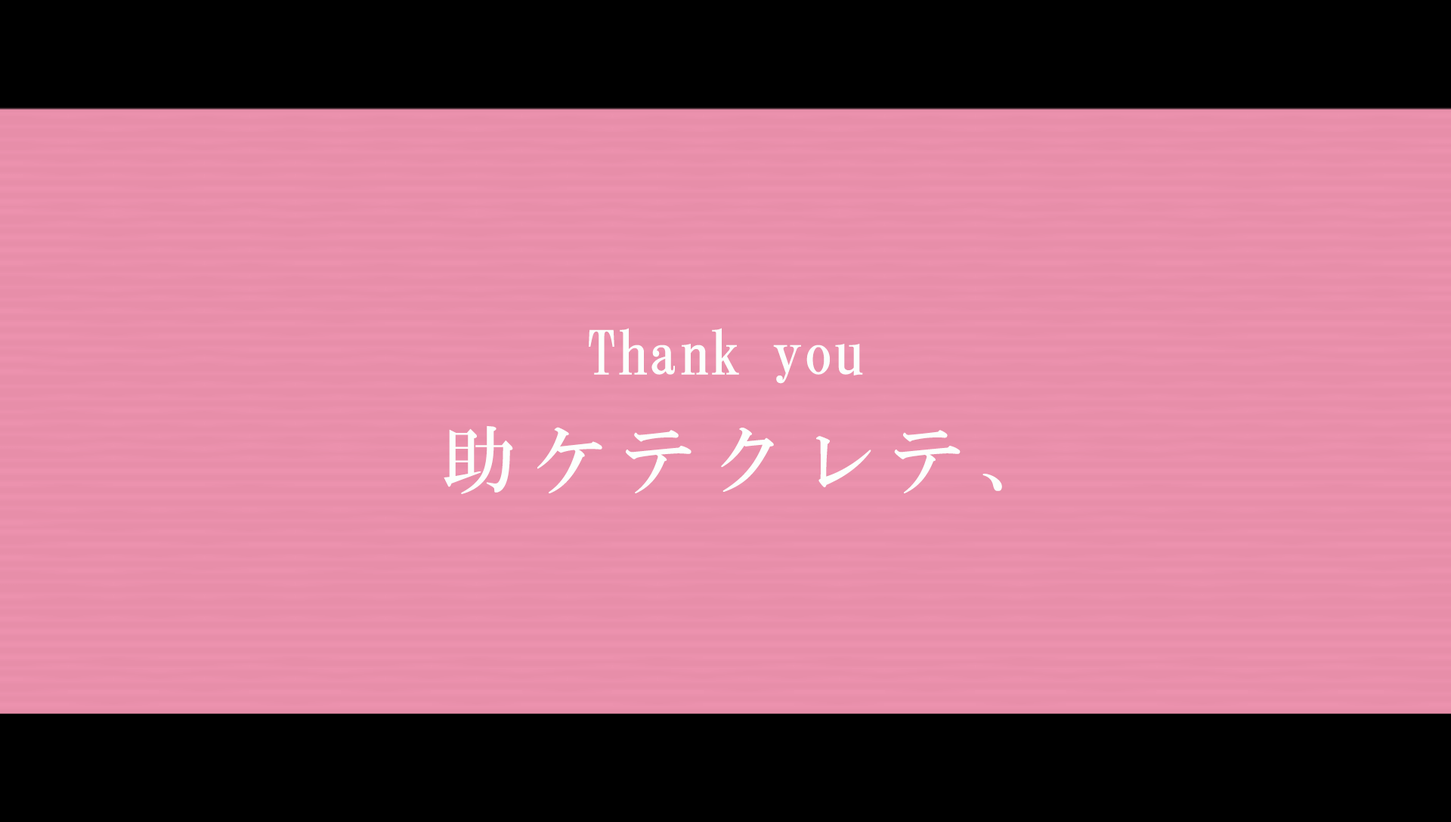
<style>
.page{position:relative;width:1451px;height:822px;background:#e78ea9}
.page>*{position:absolute;margin:0}
.t1{font:60.4px "HGMinchoB";letter-spacing:0.01em;color:#fcfffc}
.t2{font:74px "HGMinchoB";letter-spacing:0.21em;color:#fcfffc}
</style>
<div class="page">
<p class="t1" style="left:589px;top:328px;width:274px;height:56px">Thank you</p>
<p class="t2" style="left:443px;top:425px;width:559px;height:69px">助ケテクレテ、</p>
</div>
